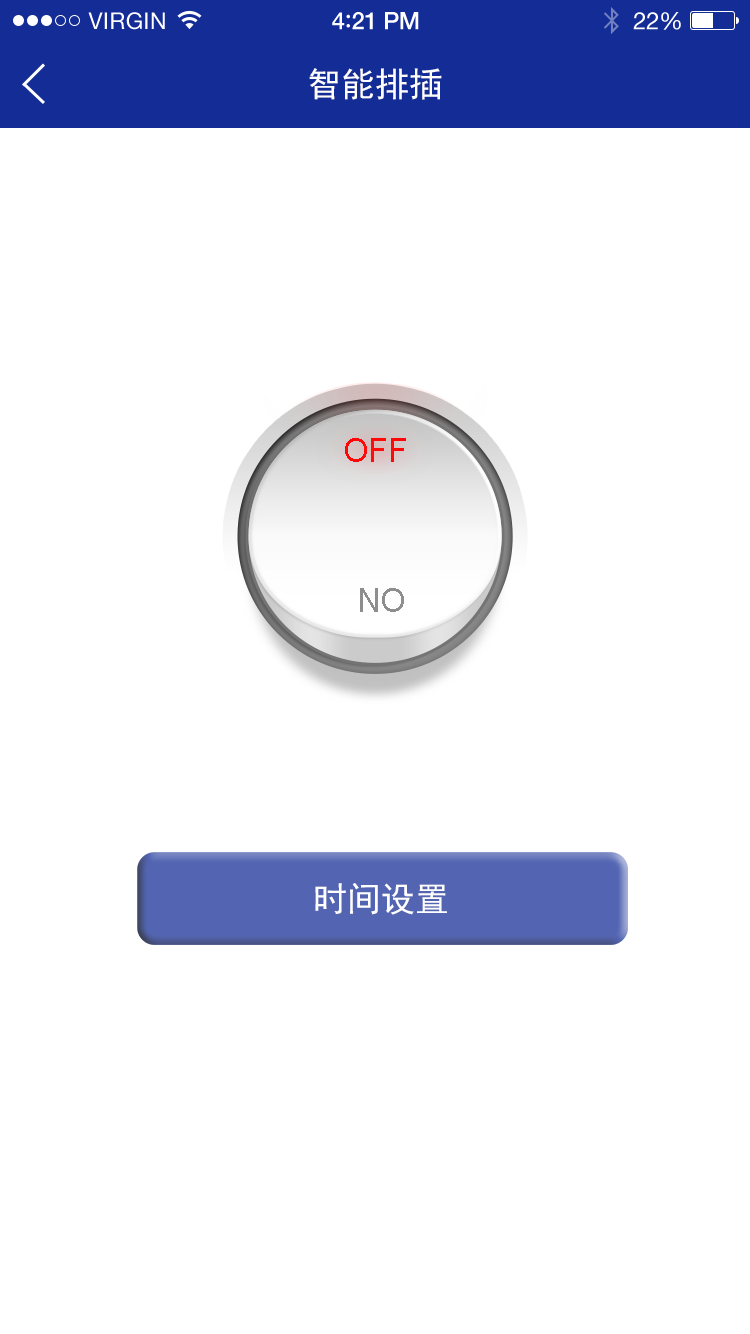
<style>
.page{position:relative;width:750px;height:1334px;background:#ffffff}
.page>*{position:absolute;margin:0}
.t1{font:34px "SimHei";color:#fefefe}
.t2{font:33.3px "ArialMT";color:#ff0101}
.t3{font:33.3px "ArialMT";color:#8e8e8e}
</style>
<div class="page">
<p class="t1" style="left:309px;top:68px;width:133px;height:32px">智能排插</p>
<p class="t2" style="left:345px;top:438px;width:61px;height:24px">OFF</p>
<p class="t3" style="left:360px;top:588px;width:44px;height:24px">NO</p>
<p class="t1" style="left:315px;top:883px;width:132px;height:32px">时间设置</p>
</div>
